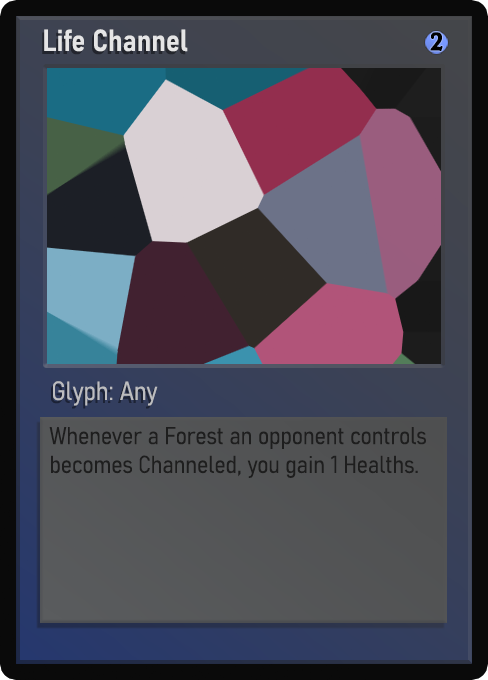
<style>
.page{position:relative;width:488px;height:680px}
.page>*{position:absolute;margin:0}
.t1{font:30px "Bahnschrift-SemiBoldSemiCondensed";color:#f2f2f2;font-weight:bold}
.t2{font:25px "WTRRoycroft";color:#000000;font-weight:bold;scale:1.09 1}
.t3{font:26px "Bahnschrift-LightSemiCondensed";color:#c8c8c8;font-weight:bold}
.t4{font:24px "Bahnschrift-LightSemiCondensed";color:#1e1e1e;font-weight:bold}
</style>
<div class="page">
<p class="t1" style="left:44px;top:29px;width:144px;height:23px;opacity:0.9">Life Channel</p>
<p class="t2" style="left:430px;top:32px;width:13px;height:19px">2</p>
<p class="t3" style="left:53px;top:381px;width:105px;height:25px;opacity:0.9">Glyph: Any</p>
<p class="t4" style="left:49px;top:427px;width:377px;height:51px">Whenever a Forest an opponent controls becomes Channeled, you gain 1 Healths.</p>
</div>
